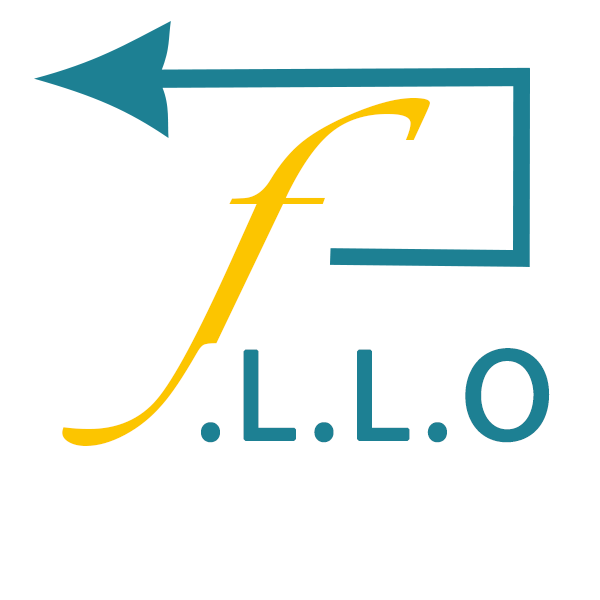
<style>
.page{position:relative;width:600px;height:600px;background:#ffffff}
.page>*{position:absolute;margin:0}
.t1{font:370.8px "Vivaldii";color:#fcc500;scale:1.35 1}
.t2{font:130px "MyriadPro-Regular";letter-spacing:0.07em;color:#1d8093;font-weight:bold}
</style>
<div class="page">
<p class="t1" style="left:62px;top:97px;width:368px;height:349px">f</p>
<p class="t2" style="left:201px;top:348px;width:349px;height:95px">.L.L.O</p>
</div>
